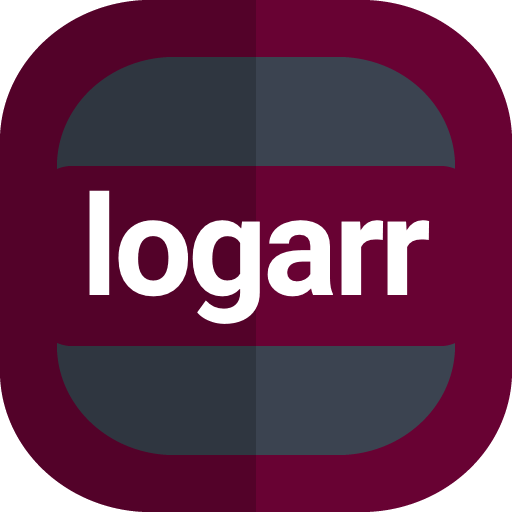
<style>
.page{position:relative;width:512px;height:512px;background:#680233}
.page>*{position:absolute;margin:0}
.t1{font:139px "Roboto-Bold";letter-spacing:-0.03em;color:#ffffff}
</style>
<div class="page">
<p class="t1" style="left:89px;top:190px;width:341px;height:134px">logarr</p>
</div>
